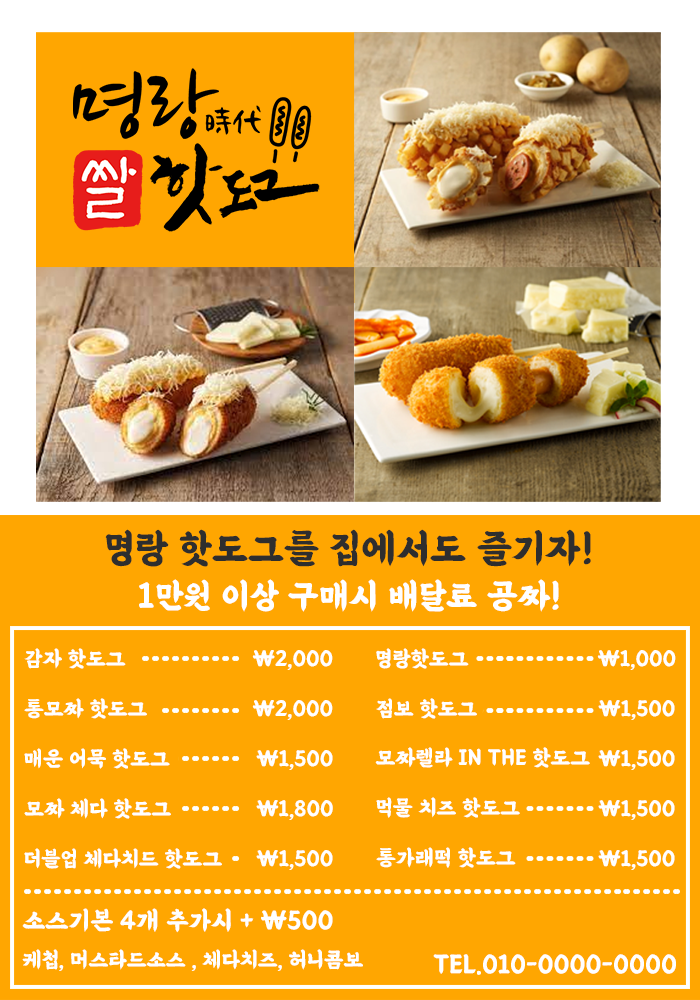
<style>
.page{position:relative;width:700px;height:1000px;background:#ffa601}
.page>*{position:absolute;margin:0}
.t1{font:40px "BMEULJIROTTF";color:#2e2e2e;text-transform:uppercase}
.t2{font:35px "BMEULJIROTTF";color:#ffffff;text-transform:uppercase}
.t3{font:22px "BMEULJIROTTF";color:#ffffff;text-transform:uppercase}
.t4{font:26px "BMEULJIROTTF";color:#ffffff;text-transform:uppercase}
</style>
<div class="page">
<p class="t1" style="left:105px;top:529px;width:486px;height:38px">명랑 핫도그를 집에서도 즐기자!</p>
<p class="t2" style="left:139px;top:579px;width:420px;height:33px">1만원 이상 구매시 배달료 공짜!</p>
<p class="t3" style="left:24px;top:648px;width:102px;height:21px">감자 핫도그</p>
<p class="t3" style="left:252px;top:650px;width:81px;height:20px">₩2,000</p>
<p class="t3" style="left:376px;top:648px;width:93px;height:21px">명랑핫도그</p>
<p class="t3" style="left:597px;top:650px;width:79px;height:20px">₩1,000</p>
<p class="t3" style="left:24px;top:698px;width:123px;height:21px">통모짜 핫도그</p>
<p class="t3" style="left:252px;top:700px;width:81px;height:20px">₩2,000</p>
<p class="t3" style="left:376px;top:698px;width:101px;height:21px">점보 핫도그</p>
<p class="t3" style="left:598px;top:700px;width:77px;height:20px">₩1,500</p>
<p class="t3" style="left:24px;top:748px;width:146px;height:21px">매운 어묵 핫도그</p>
<p class="t3" style="left:256px;top:750px;width:77px;height:20px">₩1,500</p>
<p class="t3" style="left:375px;top:747px;width:215px;height:21px">모짜렐라 IN THE 핫도그</p>
<p class="t3" style="left:598px;top:750px;width:77px;height:20px">₩1,500</p>
<p class="t3" style="left:24px;top:798px;width:147px;height:21px">모짜 체다 핫도그</p>
<p class="t3" style="left:376px;top:797px;width:144px;height:21px">먹물 치즈 핫도그</p>
<p class="t3" style="left:256px;top:800px;width:77px;height:20px">₩1,800</p>
<p class="t3" style="left:598px;top:800px;width:77px;height:20px">₩1,500</p>
<p class="t3" style="left:24px;top:848px;width:198px;height:21px">더블업 체다치드 핫도그</p>
<p class="t3" style="left:256px;top:850px;width:77px;height:20px">₩1,500</p>
<p class="t3" style="left:376px;top:847px;width:140px;height:21px">통가래떡 핫도그</p>
<p class="t3" style="left:598px;top:850px;width:77px;height:20px">₩1,500</p>
<p class="t4" style="left:22px;top:908px;width:311px;height:25px">소스기본 4개 추가시 + ₩500</p>
<p class="t3" style="left:22px;top:949px;width:341px;height:22px">케첩, 머스타드소스 , 체다치즈, 허니콤보</p>
<p class="t4" style="left:433px;top:954px;width:243px;height:21px">tel.010-0000-0000</p>
</div>
